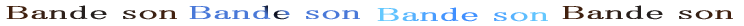
<style>
.page{position:relative;width:744px;height:26px;background:#ffffff}
.page>*{position:absolute;margin:0}
.t1{font:19px "MS-PMincho";color:#372014;font-weight:bold;scale:2.02 1}
.t2{font:19px "MS-PMincho";color:#4978d8;font-weight:bold;scale:2.02 1}
.t3{font:19px "MS-PMincho";font-weight:bold;scale:2.02 1}
</style>
<div class="page">
<p class="t1" style="left:6px;top:5px;width:171px;height:15px">Bande son</p>
<p class="t2" style="left:189px;top:5px;width:171px;height:15px">Bande son</p>
<p class="t1" style="left:562px;top:5px;width:171px;height:15px">Bande son</p>
<p class="t3" style="left:377px;top:7px;width:171px;height:15px">Bande son</p>
</div>
